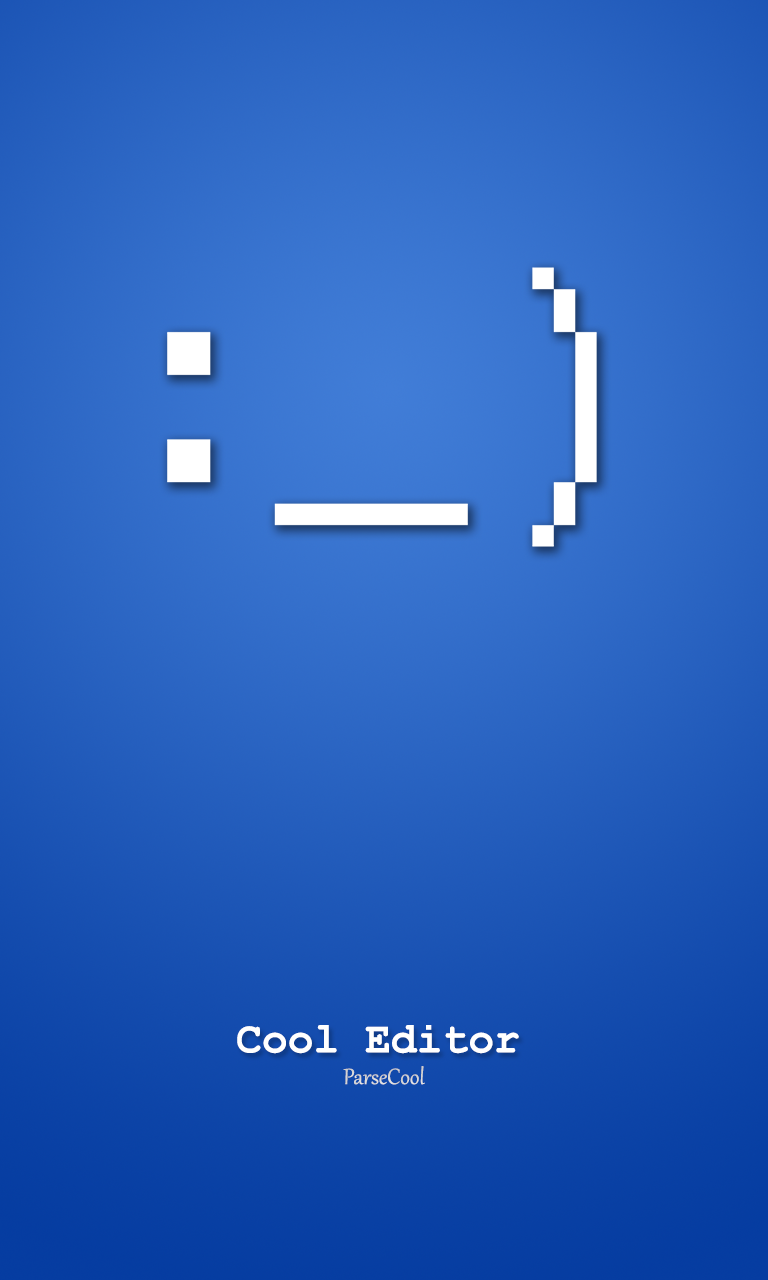
<style>
.page{position:relative;width:768px;height:1280px}
.page>*{position:absolute;margin:0}
.t1{font:43px "CourierNewPS-BoldMT";color:#ffffff}
.t2{font:27px "Gabriola";color:#d6d6d6}
</style>
<div class="page">
<p class="t1" style="left:237px;top:1025px;width:282px;height:29px">Cool Editor</p>
<p class="t2" style="left:343px;top:1066px;width:82px;height:19px">ParseCool</p>
</div>
